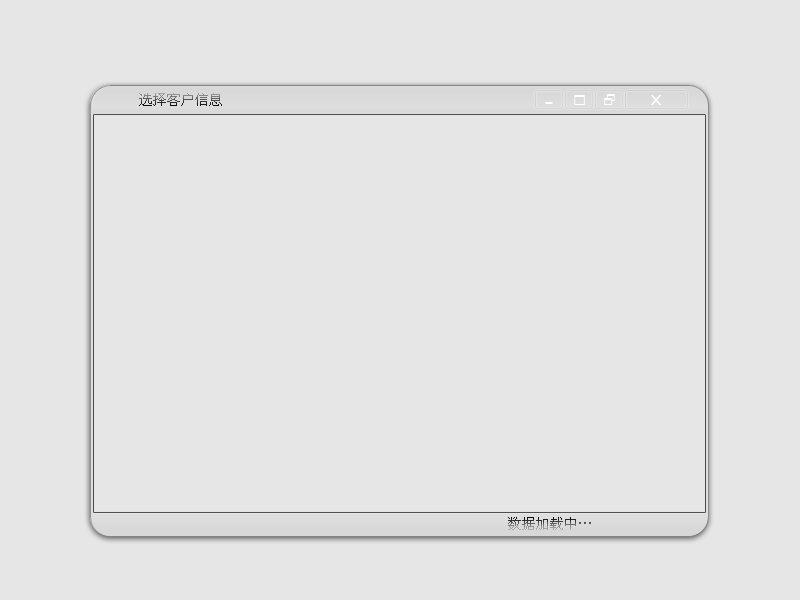
<style>
.page{position:relative;width:800px;height:600px;background:#e6e6e6}
.page>*{position:absolute;margin:0}
.t1{font:14px "SimSun"}
</style>
<div class="page">
<p class="t1" style="left:139px;top:93px;width:83px;height:13px">选择客户信息</p>
<p class="t1" style="left:508px;top:517px;width:83px;height:13px">数据加载中…</p>
</div>
